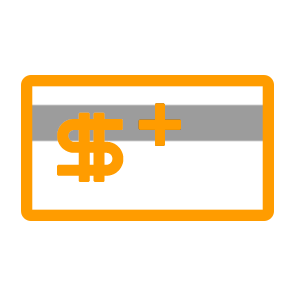
<style>
.page{position:relative;width:300px;height:300px;background:#ffffff}
.page>*{position:absolute;margin:0}
.t1{font:80px "Arkitech-Medium";color:#ff9c00;font-weight:bold}
</style>
<div class="page">
<p class="t1" style="left:57px;top:112px;width:67px;height:70px">$</p>
</div>
